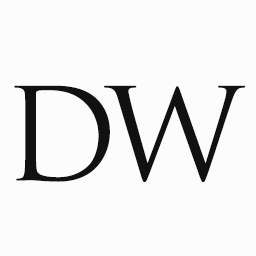
<style>
.page{position:relative;width:256px;height:256px;background:#fcfcfc}
.page>*{position:absolute;margin:0}
.t1{font:125px "TrajanPro-Regular";letter-spacing:-0.025em;color:#111111}
</style>
<div class="page">
<p class="t1" style="left:14px;top:85px;width:231px;height:98px">DW</p>
</div>
